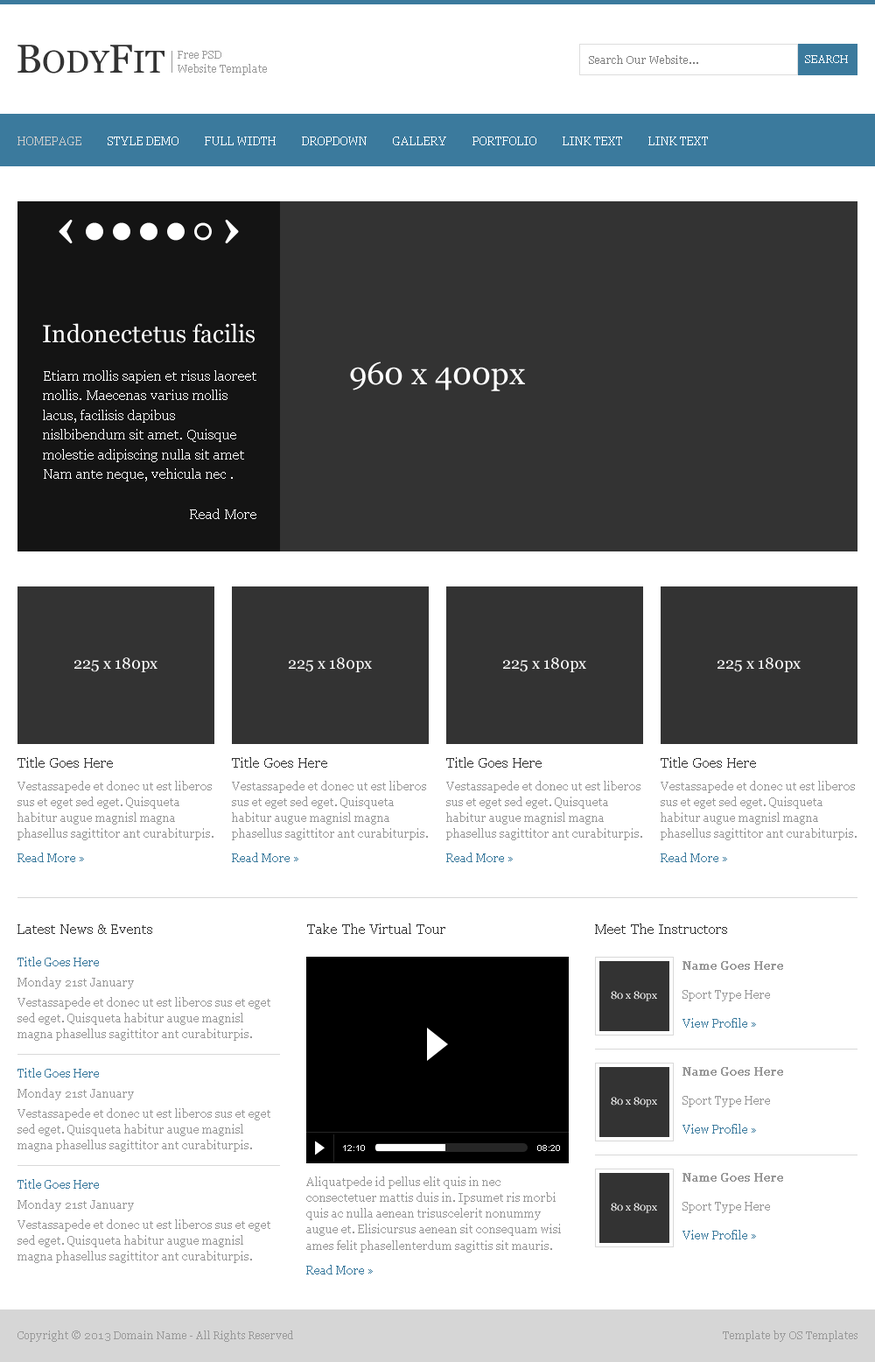
<style>
.page{position:relative;width:875px;height:1362px;background:#ffffff}
.page>*{position:absolute;margin:0}
.t1{font:31.5px "Georgia";color:#333333}
.t2{font:40.3px "Georgia";color:#333333}
.t3{font:10.5px/13.7px "Georgia";color:#999999}
.t4{font:10.5px "Georgia";color:#7f7f7f}
.t5{font:10.5px "Georgia";color:#ffffff}
.t6{font:11.4px "Georgia";color:#cccccc}
.t7{font:11.4px "Georgia";color:#ffffff}
.t8{font:24.5px "Georgia";color:#ffffff}
.t9{font:31.5px "Georgia";color:#ffffff}
.t10{font:14px/19.6px "Georgia";color:#ffffff}
.t11{font:14px "Georgia";color:#ffffff}
.t12{font:15.8px "Georgia";color:#ffffff}
.t13{font:14px "Georgia";color:#333333}
.t14{font:11.4px/15.9px "Georgia";color:#979797}
.t15{font:11.4px "Georgia";color:#3b7a9d}
.t16{font:11.4px "Georgia";color:#3a799d}
.t17{font:11.4px "Georgia";color:#979797;font-weight:bold}
.t18{font:11.4px "Georgia";color:#979797}
.t19{font:8.8px "ArialMT";color:#ffffff}
.t20{font:10.5px "Georgia";color:#999999}
</style>
<div class="page">
<p class="t1" style="left:18px;top:45px;width:147px;height:29px"><span class="t2">B</span>ODY<span class="t2">F</span>IT</p>
<p class="t3" style="left:178px;top:51px;width:89px;height:24px">Free PSD<br>Website Template</p>
<p class="t4" style="left:589px;top:55px;width:110px;height:9px">Search Our Website...</p>
<p class="t5" style="left:805px;top:55px;width:43px;height:8px">SEARCH</p>
<p class="t6" style="left:18px;top:137px;width:63px;height:8px">HOMEPAGE</p>
<p class="t7" style="left:108px;top:137px;width:71px;height:8px">STYLE DEMO</p>
<p class="t7" style="left:205px;top:137px;width:71px;height:8px">FULL WIDTH</p>
<p class="t7" style="left:302px;top:137px;width:65px;height:8px">DROPDOWN</p>
<p class="t7" style="left:393px;top:137px;width:53px;height:8px">GALLERY</p>
<p class="t7" style="left:473px;top:137px;width:64px;height:8px">PORTFOLIO</p>
<p class="t7" style="left:563px;top:137px;width:59px;height:8px">LINK TEXT</p>
<p class="t7" style="left:649px;top:137px;width:59px;height:8px">LINK TEXT</p>
<p class="t8" style="left:43px;top:323px;width:212px;height:20px">Indonectetus facilis</p>
<p class="t9" style="left:350px;top:362px;width:175px;height:29px">960 x 400px</p>
<p class="t10" style="left:43px;top:370px;width:213px;height:111px">Etiam mollis sapien et risus laoreet mollis. Maecenas varius mollis lacus, facilisis dapibus nislbibendum sit amet. Quisque molestie adipiscing nulla sit amet Nam ante neque, vehicula nec .</p>
<p class="t11" style="left:190px;top:509px;width:66px;height:10px">Read More</p>
<p class="t12" style="left:74px;top:657px;width:84px;height:15px">225 x 180px</p>
<p class="t12" style="left:289px;top:657px;width:83px;height:15px">225 x 180px</p>
<p class="t12" style="left:503px;top:657px;width:84px;height:15px">225 x 180px</p>
<p class="t12" style="left:718px;top:657px;width:83px;height:15px">225 x 180px</p>
<p class="t13" style="left:18px;top:757px;width:95px;height:11px">Title Goes Here</p>
<p class="t13" style="left:232px;top:757px;width:95px;height:11px">Title Goes Here</p>
<p class="t13" style="left:446px;top:757px;width:96px;height:11px">Title Goes Here</p>
<p class="t13" style="left:661px;top:757px;width:95px;height:11px">Title Goes Here</p>
<p class="t14" style="left:18px;top:781px;width:196px;height:59px">Vestassapede et donec ut est liberos sus et eget sed eget. Quisqueta habitur augue magnisl magna phasellus sagittitor ant curabiturpis.</p>
<p class="t14" style="left:232px;top:781px;width:196px;height:59px">Vestassapede et donec ut est liberos sus et eget sed eget. Quisqueta habitur augue magnisl magna phasellus sagittitor ant curabiturpis.</p>
<p class="t14" style="left:446px;top:781px;width:197px;height:59px">Vestassapede et donec ut est liberos sus et eget sed eget. Quisqueta habitur augue magnisl magna phasellus sagittitor ant curabiturpis.</p>
<p class="t14" style="left:661px;top:781px;width:196px;height:59px">Vestassapede et donec ut est liberos sus et eget sed eget. Quisqueta habitur augue magnisl magna phasellus sagittitor ant curabiturpis.</p>
<p class="t15" style="left:18px;top:853px;width:66px;height:9px">Read More »</p>
<p class="t15" style="left:232px;top:853px;width:67px;height:9px">Read More »</p>
<p class="t15" style="left:446px;top:853px;width:67px;height:9px">Read More »</p>
<p class="t15" style="left:661px;top:853px;width:66px;height:9px">Read More »</p>
<p class="t13" style="left:18px;top:924px;width:134px;height:10px">Latest News &amp; Events</p>
<p class="t13" style="left:307px;top:924px;width:139px;height:10px">Take The Virtual Tour</p>
<p class="t13" style="left:595px;top:924px;width:132px;height:10px">Meet The Instructors</p>
<p class="t16" style="left:18px;top:957px;width:81px;height:9px">Title Goes Here</p>
<p class="t17" style="left:683px;top:961px;width:100px;height:9px">Name Goes Here</p>
<p class="t18" style="left:18px;top:977px;width:116px;height:12px">Monday 21st January</p>
<p class="t14" style="left:18px;top:997px;width:253px;height:44px">Vestassapede et donec ut est liberos sus et eget sed eget. Quisqueta habitur augue magnisl magna phasellus sagittitor ant curabiturpis.</p>
<p class="t5" style="left:611px;top:991px;width:46px;height:10px">80 x 80px</p>
<p class="t18" style="left:683px;top:990px;width:87px;height:11px">Sport Type Here</p>
<p class="t15" style="left:683px;top:1018px;width:73px;height:10px">View Profile »</p>
<p class="t16" style="left:18px;top:1068px;width:81px;height:10px">Title Goes Here</p>
<p class="t17" style="left:683px;top:1067px;width:100px;height:9px">Name Goes Here</p>
<p class="t18" style="left:18px;top:1088px;width:116px;height:12px">Monday 21st January</p>
<p class="t5" style="left:611px;top:1097px;width:46px;height:10px">80 x 80px</p>
<p class="t18" style="left:683px;top:1096px;width:87px;height:11px">Sport Type Here</p>
<p class="t14" style="left:18px;top:1108px;width:253px;height:44px">Vestassapede et donec ut est liberos sus et eget sed eget. Quisqueta habitur augue magnisl magna phasellus sagittitor ant curabiturpis.</p>
<p class="t15" style="left:683px;top:1124px;width:73px;height:10px">View Profile »</p>
<p class="t19" style="left:343px;top:1145px;width:22px;height:6px">12:10</p>
<p class="t19" style="left:538px;top:1145px;width:22px;height:6px">08:20</p>
<p class="t16" style="left:18px;top:1179px;width:81px;height:10px">Title Goes Here</p>
<p class="t14" style="left:306px;top:1177px;width:255px;height:76px">Aliquatpede id pellus elit quis in nec consectetuer mattis duis in. Ipsumet ris morbi quis ac nulla aenean trisuscelerit nonummy augue et. Elisicursus aenean sit consequam wisi ames felit phasellenterdum sagittis sit mauris.</p>
<p class="t17" style="left:683px;top:1173px;width:100px;height:9px">Name Goes Here</p>
<p class="t18" style="left:18px;top:1199px;width:116px;height:13px">Monday 21st January</p>
<p class="t5" style="left:611px;top:1203px;width:46px;height:10px">80 x 80px</p>
<p class="t18" style="left:683px;top:1202px;width:87px;height:11px">Sport Type Here</p>
<p class="t14" style="left:18px;top:1219px;width:253px;height:44px">Vestassapede et donec ut est liberos sus et eget sed eget. Quisqueta habitur augue magnisl magna phasellus sagittitor ant curabiturpis.</p>
<p class="t15" style="left:683px;top:1230px;width:73px;height:10px">View Profile »</p>
<p class="t16" style="left:306px;top:1265px;width:67px;height:10px">Read More »</p>
<p class="t20" style="left:18px;top:1331px;width:275px;height:11px">Copyright © 2013 Domain Name - All Rights Reserved</p>
<p class="t20" style="left:723px;top:1331px;width:135px;height:11px">Template by OS Templates</p>
</div>
